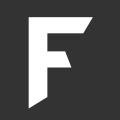
<style>
.page{position:relative;width:120px;height:120px;background:#333333}
.page>*{position:absolute;margin:0}
.t1{font:113.7px "AmazObitaemOstrovV.2";color:#ffffff}
</style>
<div class="page">
<p class="t1" style="left:28px;top:17px;width:65px;height:92px">F</p>
</div>
